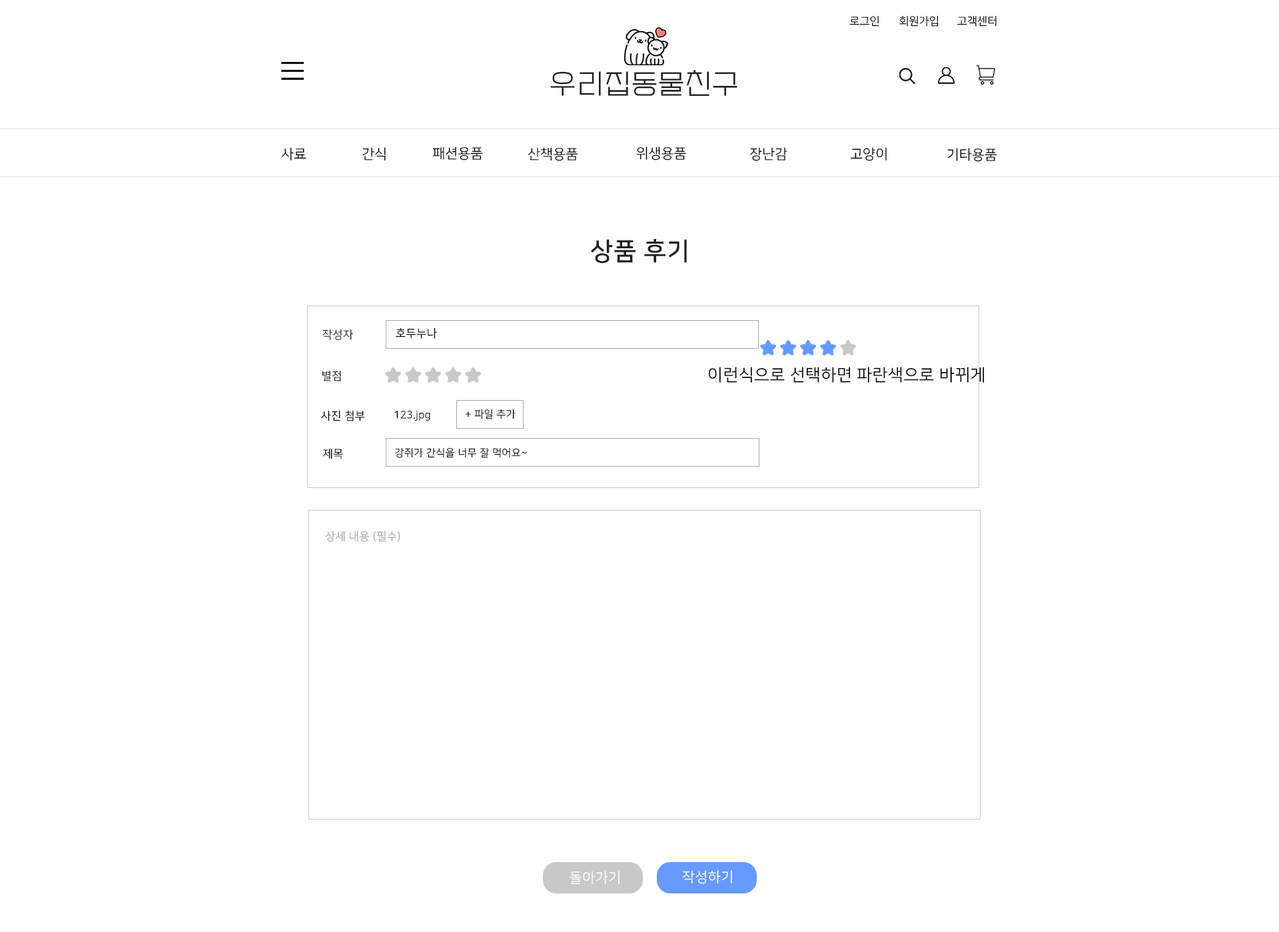
<style>
.page{position:relative;width:1279px;height:932px;background:#ffffff}
.page>*{position:absolute;margin:0}
.t1{font:11.1px "NanumSquareR";color:#000000}
.t2{font:27.8px "EF_watermelonSalad";letter-spacing:0.025em;color:#202020}
.t3{font:13.9px "NanumSquareR";color:#000000}
.t4{font:25px "NanumSquareB";letter-spacing:0.025em;color:#202020}
.t5{font:11.1px "NanumSquareR";letter-spacing:0.025em;color:#202020}
.t6{font:11.1px "NanumSquareR";letter-spacing:0.025em;color:#000000}
.t7{font:16.7px "NanumSquareR";letter-spacing:0.025em;color:#000000}
.t8{font:10.3px "NanumSquareR";letter-spacing:0.025em;color:#000000}
.t9{font:11.1px "NanumSquareR";letter-spacing:0.025em;color:#a8a8a8}
.t10{font:13.9px "NanumSquareR";letter-spacing:0.025em;color:#ffffff}
</style>
<div class="page">
<p class="t1" style="left:849px;top:15px;width:30px;height:12px">로그인</p>
<p class="t1" style="left:899px;top:15px;width:39px;height:12px">회원가입</p>
<p class="t1" style="left:957px;top:15px;width:39px;height:12px">고객센터</p>
<p class="t2" style="left:550px;top:70px;width:187px;height:26px">우리집동물친구</p>
<p class="t3" style="left:281px;top:147px;width:25px;height:14px">사료</p>
<p class="t3" style="left:362px;top:147px;width:24px;height:14px">간식</p>
<p class="t3" style="left:432px;top:147px;width:51px;height:14px">패션용품</p>
<p class="t3" style="left:528px;top:147px;width:50px;height:14px">산책용품</p>
<p class="t3" style="left:636px;top:147px;width:50px;height:14px">위생용품</p>
<p class="t3" style="left:750px;top:147px;width:37px;height:14px">장난감</p>
<p class="t3" style="left:850px;top:147px;width:37px;height:14px">고양이</p>
<p class="t3" style="left:947px;top:148px;width:50px;height:14px">기타용품</p>
<p class="t4" style="left:590px;top:239px;width:97px;height:25px">상품 후기</p>
<p class="t5" style="left:322px;top:329px;width:31px;height:11px">작성자</p>
<p class="t6" style="left:396px;top:328px;width:41px;height:11px">호두누나</p>
<p class="t5" style="left:322px;top:370px;width:19px;height:12px">별점</p>
<p class="t7" style="left:708px;top:367px;width:276px;height:16px">이런식으로 선택하면 파란색으로 바뀌게</p>
<p class="t6" style="left:321px;top:410px;width:44px;height:12px">사진 첨부</p>
<p class="t8" style="left:394px;top:410px;width:36px;height:11px">123.jpg</p>
<p class="t8" style="left:465px;top:409px;width:51px;height:11px">+ 파일 추가</p>
<p class="t6" style="left:322px;top:448px;width:21px;height:12px">제목</p>
<p class="t8" style="left:395px;top:448px;width:132px;height:10px">강쥐가 간식을 너무 잘 먹어요~</p>
<p class="t9" style="left:325px;top:531px;width:75px;height:11px">상세 내용 (필수)</p>
<p class="t10" style="left:569px;top:871px;width:50px;height:14px">돌아가기</p>
<p class="t10" style="left:682px;top:871px;width:50px;height:14px">작성하기</p>
</div>
